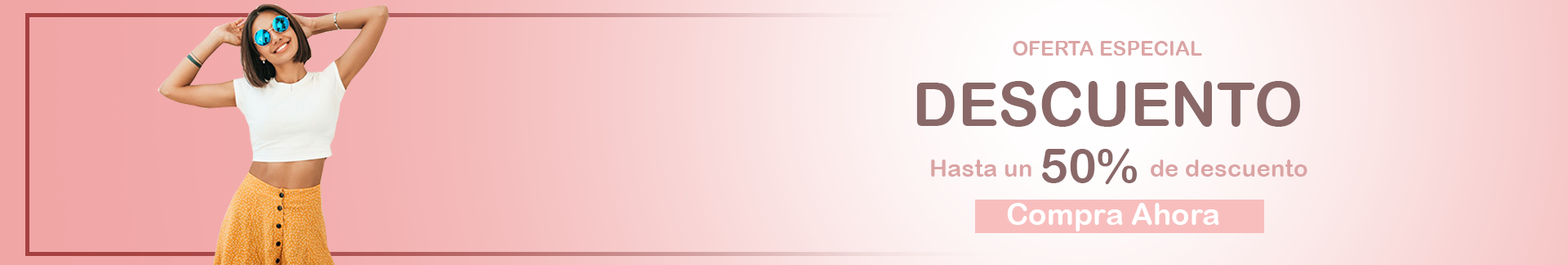
<style>
.page{position:relative;width:1568px;height:265px}
.page>*{position:absolute;margin:0}
.t1{font:20.4px "ArialRoundedMTBold";color:#dba4a4}
.t2{font:60.9px "ArialRoundedMTBold";color:#8a6868}
.t3{font:48.4px "ArialRoundedMTBold";color:#8a6868}
.t4{font:24.1px "ArialRoundedMTBold";color:#dba4a4}
.t5{font:30.4px "ArialRoundedMTBold";color:#ffffff}
</style>
<div class="page">
<p class="t1" style="left:1013px;top:41px;width:189px;height:15px">OFERTA ESPECIAL</p>
<p class="t2" style="left:916px;top:81px;width:384px;height:46px">DESCUENTO</p>
<p class="t3" style="left:1042px;top:148px;width:95px;height:37px">50%</p>
<p class="t4" style="left:931px;top:159px;width:100px;height:17px">Hasta un</p>
<p class="t4" style="left:1151px;top:159px;width:156px;height:17px">de descuento</p>
<p class="t5" style="left:1007px;top:203px;width:212px;height:28px">Compra Ahora</p>
</div>
